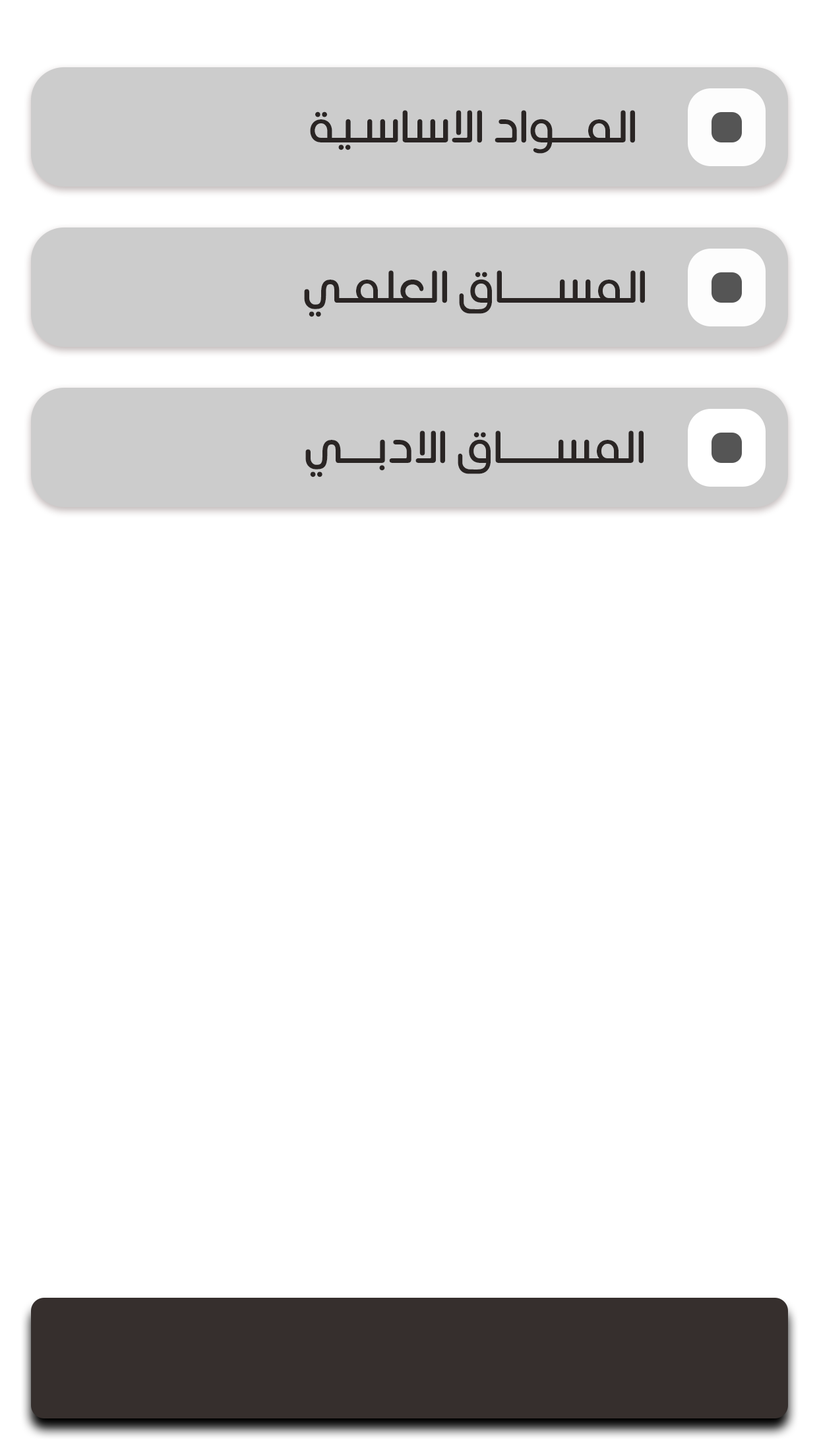
<style>
.page{position:relative;width:819px;height:1456px;background:#ffffff}
.page>*{position:absolute;margin:0}
.t1{font:45.5px "TSRotger-Regular";color:#2a2524}
</style>
<div class="page">
<p class="t1" style="left:310px;top:110px;width:325px;height:44px">المـــواد الاساسـية</p>
<p class="t1" style="left:304px;top:270px;width:341px;height:47px">المســـــاق العلمـي</p>
<p class="t1" style="left:305px;top:431px;width:339px;height:46px">المســـــاق الادبـــي</p>
</div>
